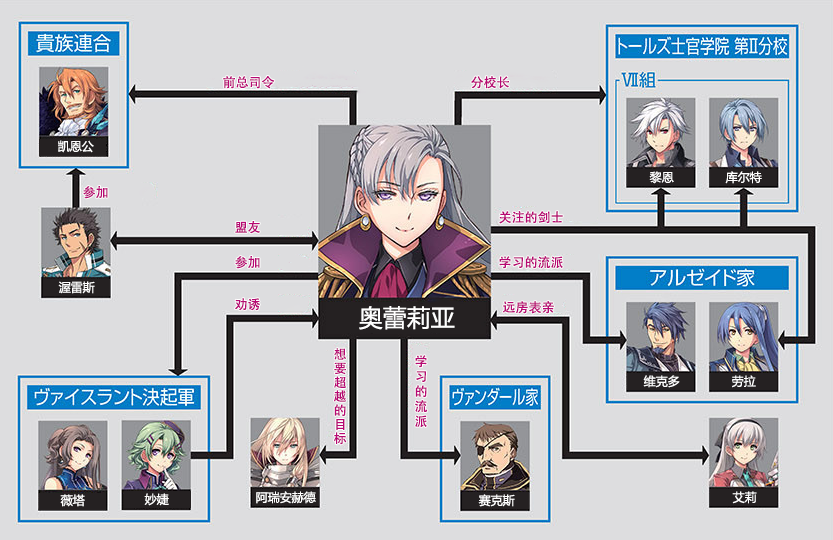
<style>
.page{position:relative;width:833px;height:540px;background:#dddddf}
.page>*{position:absolute;margin:0}
.t1{font:13px "AdobeHeitiStd-Regular";color:#b70773}
.t2{font:12px "MicrosoftYaHei";color:#ffffff}
.t3{font:24px "MicrosoftYaHei";color:#ffffff}
.t4{font:13px/14px "AdobeHeitiStd-Regular";color:#b70773}
.t5{font:13px/15px "AdobeHeitiStd-Regular";color:#b70773}
</style>
<div class="page">
<p class="t1" style="left:223px;top:76px;width:52px;height:13px">前总司令</p>
<p class="t1" style="left:471px;top:76px;width:38px;height:13px">分校长</p>
<p class="t2" style="left:58px;top:140px;width:36px;height:13px">凯恩公</p>
<p class="t2" style="left:649px;top:171px;width:25px;height:13px">黎恩</p>
<p class="t2" style="left:725px;top:171px;width:37px;height:13px">库尔特</p>
<p class="t1" style="left:83px;top:186px;width:25px;height:13px">参加</p>
<p class="t1" style="left:235px;top:221px;width:25px;height:13px">盟友</p>
<p class="t1" style="left:499px;top:211px;width:64px;height:13px">关注的剑士</p>
<p class="t1" style="left:235px;top:256px;width:25px;height:13px">参加</p>
<p class="t1" style="left:499px;top:256px;width:64px;height:13px">学习的流派</p>
<p class="t2" style="left:58px;top:281px;width:37px;height:13px">渥雷斯</p>
<p class="t1" style="left:235px;top:298px;width:25px;height:13px">劝诱</p>
<p class="t1" style="left:502px;top:301px;width:52px;height:13px">远房表亲</p>
<p class="t3" style="left:359px;top:306px;width:96px;height:24px">奥蕾莉亚</p>
<p class="t4" style="left:334px;top:348px;width:13px;height:97px">想<br>要<br>超<br>越<br>的<br>目<br>标</p>
<p class="t5" style="left:415px;top:355px;width:13px;height:73px">学<br>习<br>的<br>流<br>派</p>
<p class="t2" style="left:643px;top:375px;width:37px;height:13px">维克多</p>
<p class="t2" style="left:732px;top:375px;width:24px;height:13px">劳拉</p>
<p class="t2" style="left:60px;top:494px;width:25px;height:13px">薇塔</p>
<p class="t2" style="left:144px;top:493px;width:25px;height:13px">妙婕</p>
<p class="t2" style="left:256px;top:491px;width:60px;height:13px">阿瑞安赫德</p>
<p class="t2" style="left:478px;top:494px;width:37px;height:13px">赛克斯</p>
<p class="t2" style="left:732px;top:491px;width:25px;height:13px">艾莉</p>
</div>
